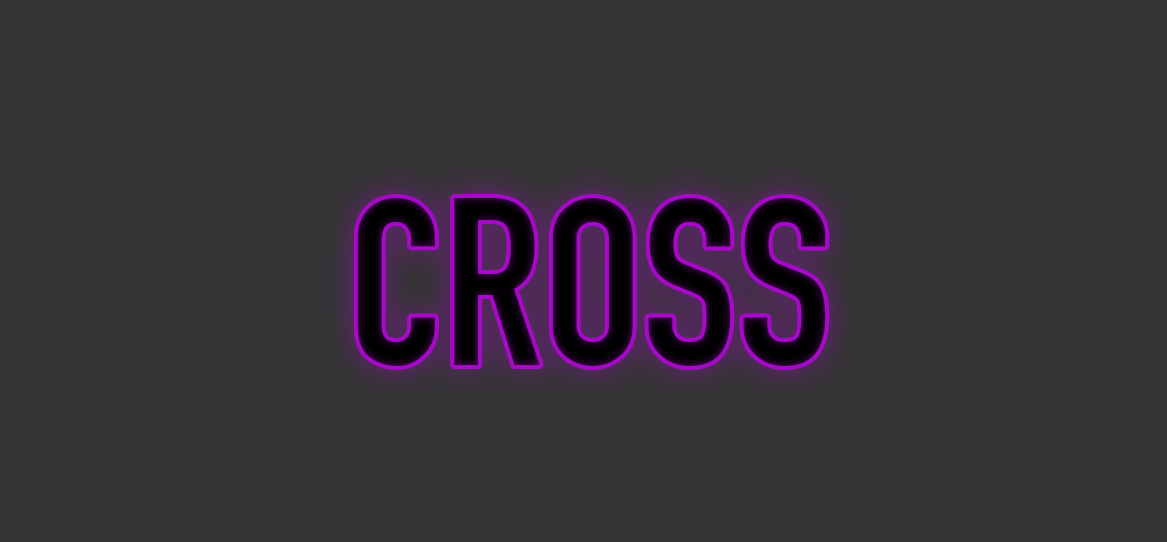
<style>
.page{position:relative;width:1167px;height:542px;background:#333333}
.page>*{position:absolute;margin:0}
.t1{font:233.7px "DINEngschrift";color:#070009}
</style>
<div class="page">
<p class="t1" style="left:357px;top:198px;width:469px;height:168px">CROSS</p>
</div>
